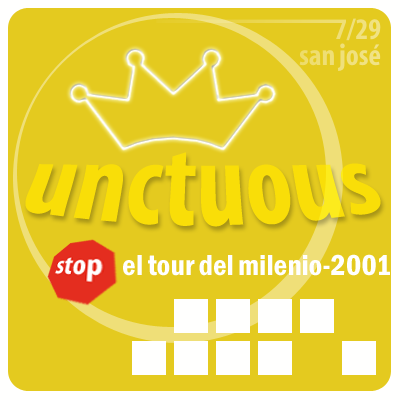
<style>
.page{position:relative;width:400px;height:400px;background:#e4ca1f}
.page>*{position:absolute;margin:0}
.t1{font:100px "Myriad-CnBold";color:#f9de08}
.t2{font:30px "FranklinGothic-DemiCond";color:#ffffff}
</style>
<div class="page">
<p class="t1" style="left:25px;top:152px;width:356px;height:75px">unctuous</p>
<p class="t2" style="left:123px;top:254px;width:267px;height:22px">el tour del milenio-2001</p>
</div>
